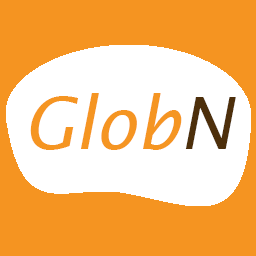
<style>
.page{position:relative;width:256px;height:256px;background:#f59421}
.page>*{position:absolute;margin:0}
.t1{font:72px "LucidaSans-Italic";color:#f69522}
.t2{font:72px "LucidaSans-Italic";color:#4d2f0b}
</style>
<div class="page">
<p class="t1" style="left:30px;top:93px;width:206px;height:57px">Glob<span class="t2">N</span></p>
</div>
